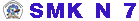
<style>
.page{position:relative;width:139px;height:21px;background:#ffffff}
.page>*{position:absolute;margin:0}
.t1{font:20.8px "Swiss721BT-Black";letter-spacing:0.1em;color:#3a15c3}
</style>
<div class="page">
<p class="t1" style="left:30px;top:3px;width:106px;height:15px">SMK N 7</p>
</div>
